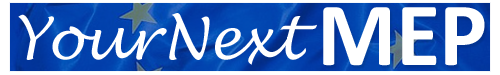
<style>
.page{position:relative;width:500px;height:75px;background:#ffffff}
.page>*{position:absolute;margin:0}
.t1{font:57.4px "LucidaHandwriting-Italic";color:#ffffff}
.t2{font:57.4px "LucidaHandwriting-Italic";letter-spacing:-0.025em;color:#ffffff}
.t3{font:57.4px "LucidaHandwriting-Italic";letter-spacing:-0.01em;color:#ffffff}
.t4{font:57.4px "LucidaHandwriting-Italic";letter-spacing:0.05em;color:#ffffff}
.t5{font:91.6px "Calibri-Bold";color:#fefefe}
</style>
<div class="page">
<p class="t1" style="left:18px;top:13px;width:299px;height:52px"><span class="t2">Y</span><span class="t3">o</span>u<span class="t4">r</span>N<span class="t2">e</span>xt</p>
<p class="t5" style="left:323px;top:7px;width:162px;height:59px">MEP</p>
</div>
